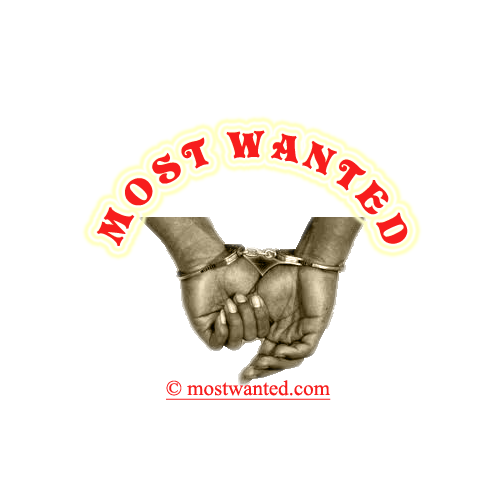
<style>
.page{position:relative;width:500px;height:500px;background:#ffffff}
.page>*{position:absolute;margin:0}
.t1{font:60px "Vivian";color:#f71d1d;text-transform:uppercase}
.t2{font:36px "TimesNewRomanPSMT";color:#f71d1d;text-decoration:underline}
</style>
<div class="page">
<p class="t1" style="left:96px;top:130px;width:312px;height:116px;text-align:center">Most wanted</p>
<p class="t2" style="left:166px;top:380px;width:165px;height:20px">© mostwanted.com</p>
</div>
